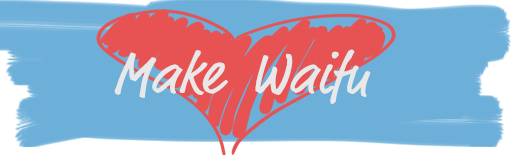
<style>
.page{position:relative;width:512px;height:155px;background:#6cafd9}
.page>*{position:absolute;margin:0}
.t1{font:58.3px "MarketOT";color:#e8e8e8}
</style>
<div class="page">
<p class="t1" style="left:114px;top:49px;width:257px;height:55px">Make  Waifu</p>
</div>
